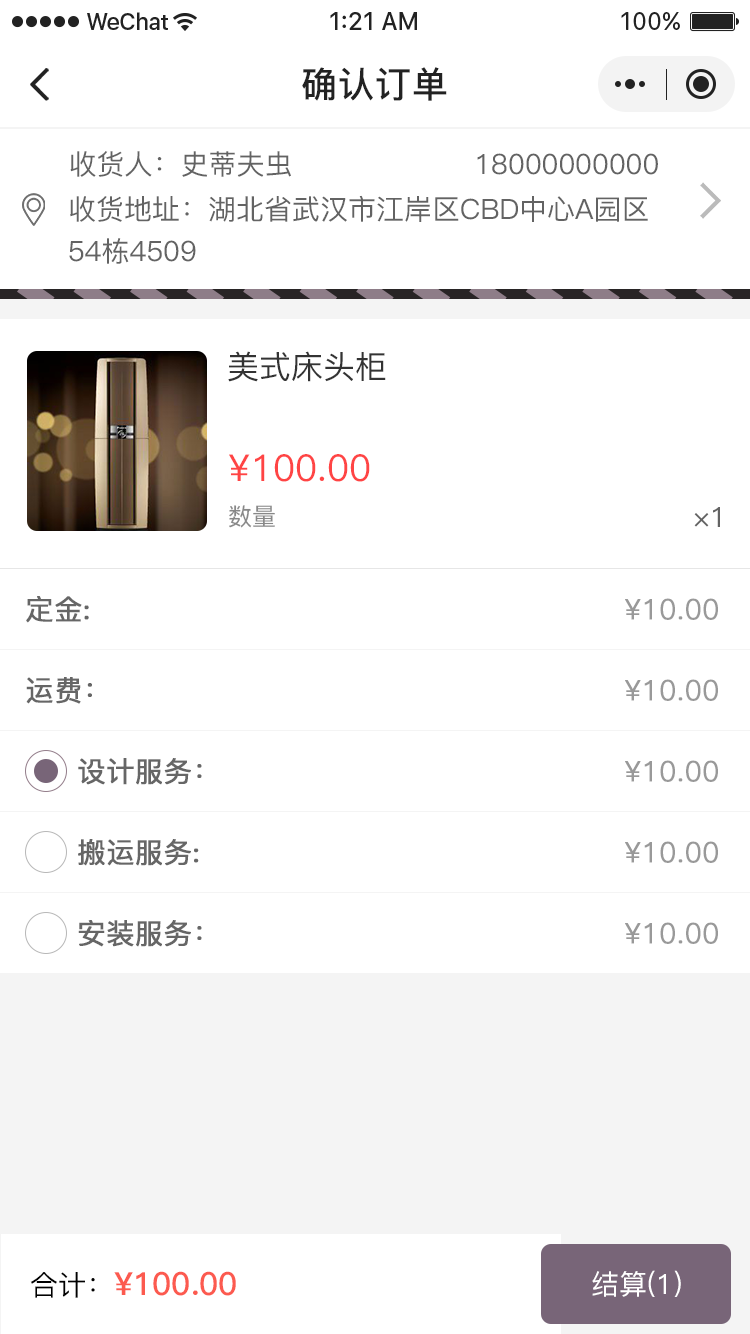
<style>
.page{position:relative;width:750px;height:1334px;background:#ffffff}
.page>*{position:absolute;margin:0}
.t1{font:36px "PingFang-SC-Bold";letter-spacing:0.028em;color:#222222}
.t2{font:28px "PingFang-SC-Medium";color:#636363;text-transform:uppercase}
.t3{font:28px/42px "PingFang-SC-Medium";color:#636363;text-transform:uppercase}
.t4{font:32px "PingFang-SC-Medium";color:#333333;text-transform:uppercase}
.t5{font:37px "PingFang-SC-Medium";color:#ff4444;text-transform:uppercase}
.t6{font:24px "PingFang-SC-Medium";color:#888888;text-transform:uppercase}
.t7{font:28px "PingFang-SC-Medium";color:#666666;font-weight:bold}
.t8{font:28px "PingFang-SC-Regular";color:#999999;font-weight:bold}
.t9{font:32px "PingFang-SC-Bold";color:#fc5a4f}
.t10{font:28px "PingFang-SC-Medium";color:#000000}
.t11{font:28px "PingFang-SC-Medium";color:#ffffff}
</style>
<div class="page">
<p class="t1" style="left:302px;top:67px;width:145px;height:34px">确认订单</p>
<p class="t2" style="left:70px;top:151px;width:221px;height:26px">收货人：史蒂夫虫</p>
<p class="t2" style="left:477px;top:153px;width:181px;height:22px">18000000000</p>
<p class="t3" style="left:69px;top:195px;width:579px;height:69px">收货地址：湖北省武汉市江岸区CBD中心A园区<br>54栋4509</p>
<p class="t4" style="left:228px;top:351px;width:158px;height:31px">美式床头柜</p>
<p class="t5" style="left:229px;top:454px;width:141px;height:28px">¥100.00</p>
<p class="t6" style="left:229px;top:505px;width:46px;height:23px">数量</p>
<p class="t2" style="left:694px;top:507px;width:26px;height:20px">×1</p>
<p class="t7" style="left:26px;top:596px;width:63px;height:27px">定金:</p>
<p class="t8" style="left:625px;top:598px;width:93px;height:22px">¥10.00</p>
<p class="t7" style="left:26px;top:677px;width:66px;height:27px">运费：</p>
<p class="t8" style="left:625px;top:679px;width:93px;height:22px">¥10.00</p>
<p class="t7" style="left:78px;top:758px;width:124px;height:27px">设计服务：</p>
<p class="t8" style="left:625px;top:760px;width:93px;height:22px">¥10.00</p>
<p class="t7" style="left:78px;top:839px;width:121px;height:27px">搬运服务:</p>
<p class="t8" style="left:625px;top:841px;width:93px;height:22px">¥10.00</p>
<p class="t7" style="left:78px;top:920px;width:124px;height:27px">安装服务：</p>
<p class="t8" style="left:625px;top:922px;width:93px;height:22px">¥10.00</p>
<p class="t9" style="left:30px;top:1271px;width:206px;height:27px"><span class="t10">合计：</span>¥100.00</p>
<p class="t11" style="left:592px;top:1270px;width:89px;height:27px">结算(1)</p>
</div>
